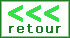
<style>
.page{position:relative;width:70px;height:38px;background:#ffffff}
.page>*{position:absolute;margin:0}
.t1{font:14px "TrebuchetMS";letter-spacing:0.1em;color:#1e7f22;font-weight:bold}
</style>
<div class="page">
<p class="t1" style="left:9px;top:24px;width:52px;height:9px">retour</p>
</div>
